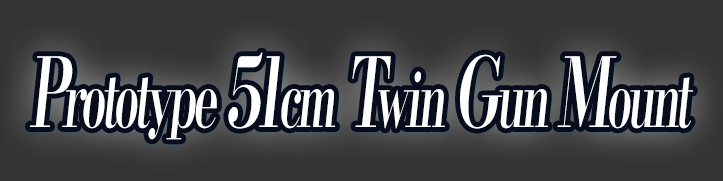
<style>
.page{position:relative;width:723px;height:181px;background:#333333}
.page>*{position:absolute;margin:0}
.t1{font:76.8px "KochoStd-Heavy";letter-spacing:-0.08em;color:#ffffff;font-style:italic;scale:0.59 1}
.t2{font:96px "KochoStd-Heavy";letter-spacing:-0.08em;color:#ffffff;font-style:italic;scale:0.59 1}
</style>
<div class="page">
<p class="t1" style="left:29px;top:52px;width:664px;height:88px"><span class="t2">P</span>rototype <span class="t2">51</span>cm<span class="t2"> T</span>win <span class="t2">G</span>un <span class="t2">M</span>ount</p>
</div>
